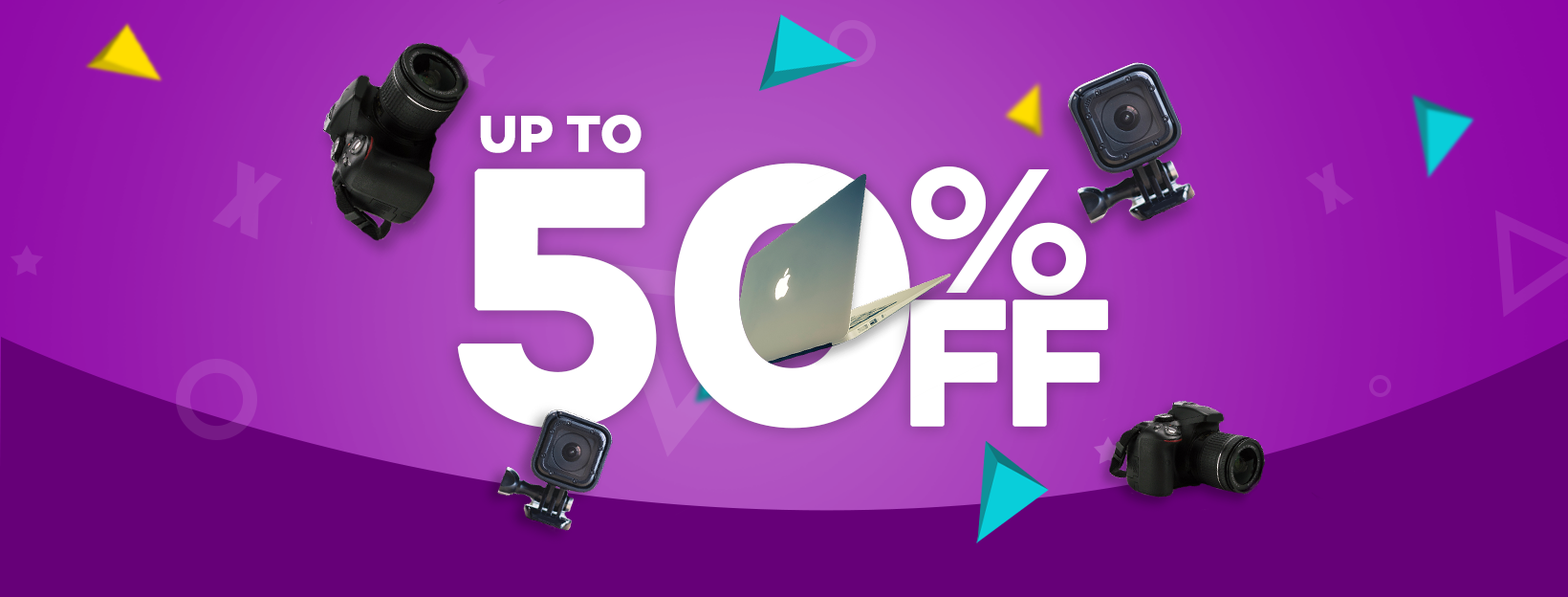
<style>
.page{position:relative;width:1568px;height:597px;background:#660078}
.page>*{position:absolute;margin:0}
.t1{font:52.6px "Campton-BoldDEMO";color:#ffffff;text-transform:uppercase;font-weight:bold}
.t2{font:363.3px "Campton-BoldDEMO";letter-spacing:-0.05em;color:#ffffff;text-transform:uppercase;font-weight:bold}
.t3{font:181.7px "Campton-BoldDEMO";letter-spacing:-0.05em;color:#ffffff}
.t4{font:181.7px "Campton-BoldDEMO";letter-spacing:-0.05em;color:#ffffff;text-transform:uppercase;font-weight:bold}
</style>
<div class="page">
<p class="t1" style="left:480px;top:115px;width:162px;height:38px">Up to</p>
<p class="t2" style="left:457px;top:163px;width:453px;height:265px">50</p>
<p class="t3" style="left:911px;top:166px;width:175px;height:130px">%</p>
<p class="t4" style="left:910px;top:299px;width:198px;height:127px">ff</p>
</div>
